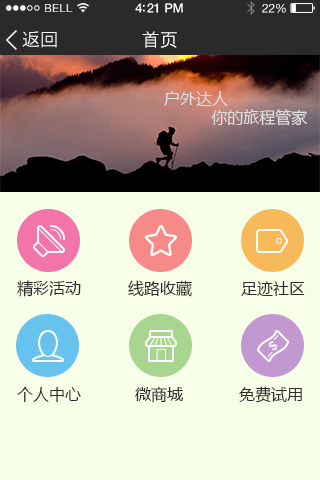
<style>
.page{position:relative;width:320px;height:480px;background:#f7ffe8}
.page>*{position:absolute;margin:0}
.t1{font:11.9px "HelveticaNeue";letter-spacing:0.02em;color:#ffffff;scale:0.97 1}
.t2{font:13px "HelveticaNeue-Medium";letter-spacing:-0.02em;color:#ffffff;scale:0.97 1}
.t3{font:12.4px "HelveticaNeue";letter-spacing:-0.02em;color:#ffffff;scale:0.97 1}
.t4{font:18px "HiraginoSansGB-W3";color:#ffffff}
.t5{font:18px "STHeitiSC-Light";color:#ffffff}
.t6{font:16px "MicrosoftYaHei";color:#dedede}
.t7{font:16px "MicrosoftYaHei";color:#2d2d2d}
</style>
<div class="page">
<p class="t1" style="left:45px;top:4px;width:28px;height:8px">BELL</p>
<p class="t2" style="left:135px;top:3px;width:48px;height:10px">4:21 PM</p>
<p class="t3" style="left:262px;top:4px;width:24px;height:9px">22%</p>
<p class="t4" style="left:22px;top:31px;width:35px;height:17px">返回</p>
<p class="t5" style="left:142px;top:31px;width:35px;height:17px">首页</p>
<p class="t6" style="left:164px;top:91px;width:144px;height:35px">户外达人<br>          你的旅程管家</p>
<p class="t7" style="left:17px;top:280px;width:64px;height:17px">精彩活动</p>
<p class="t7" style="left:128px;top:280px;width:64px;height:17px">线路收藏</p>
<p class="t7" style="left:241px;top:281px;width:64px;height:15px">足迹社区</p>
<p class="t7" style="left:17px;top:387px;width:64px;height:15px">个人中心</p>
<p class="t7" style="left:135px;top:386px;width:48px;height:17px">微商城</p>
<p class="t7" style="left:239px;top:386px;width:63px;height:17px">免费试用</p>
</div>
